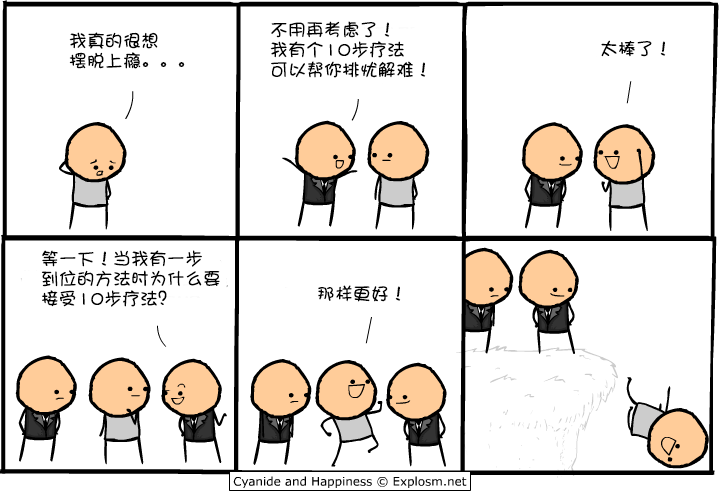
<style>
.page{position:relative;width:720px;height:495px;background:#ffffff}
.page>*{position:absolute;margin:0}
.t1{font:18px/20px "DFPShaoNvW5";color:#000000}
.t2{font:18px "DFPShaoNvW5";color:#000000}
</style>
<div class="page">
<p class="t1" style="left:270px;top:21px;width:156px;height:57px">不用再考虑了！<br>我有个10步疗法<br>可以帮你排忧解难！</p>
<p class="t1" style="left:69px;top:32px;width:116px;height:37px">我真的很想<br>摆脱上瘾。。。</p>
<p class="t2" style="left:601px;top:40px;width:65px;height:17px">太棒了！</p>
<p class="t1" style="left:41px;top:250px;width:179px;height:57px">等一下！当我有一步<br>到位的方法时为什么要<br>接受10步疗法？</p>
<p class="t2" style="left:318px;top:285px;width:83px;height:17px">那样更好！</p>
</div>
